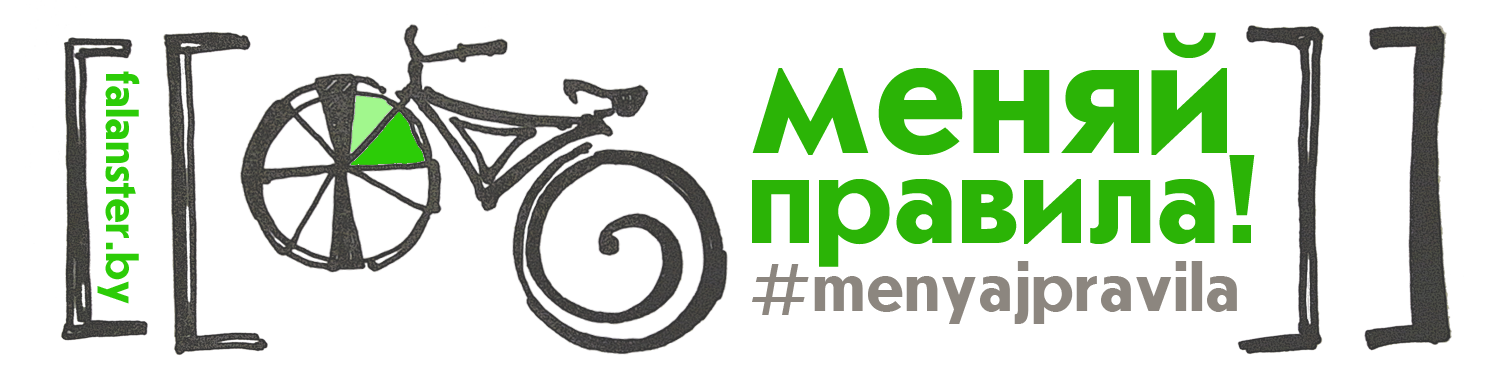
<style>
.page{position:relative;width:1500px;height:375px;background:#ffffff}
.page>*{position:absolute;margin:0}
.t1{font:129.9px/89.9px "UkrainianJournalSansBold";color:#2bb406}
.t2{font:172px/89.9px "UkrainianJournalSansBold";color:#2bb406}
.t3{font:46.8px "UkrainianJournalSansBold";color:#2ccc07}
.t4{font:70.9px "UkrainianJournalSansBold";color:#8c867f}
</style>
<div class="page">
<p class="t1" style="left:752px;top:32px;width:503px;height:235px"><span class="t2">меняй<br></span>правила!</p>
<p class="t3" style="left:97px;top:71px;width:43px;height:233px;rotate:90deg">falanster.by</p>
<p class="t4" style="left:752px;top:261px;width:485px;height:63px">#menyajpravila</p>
</div>
